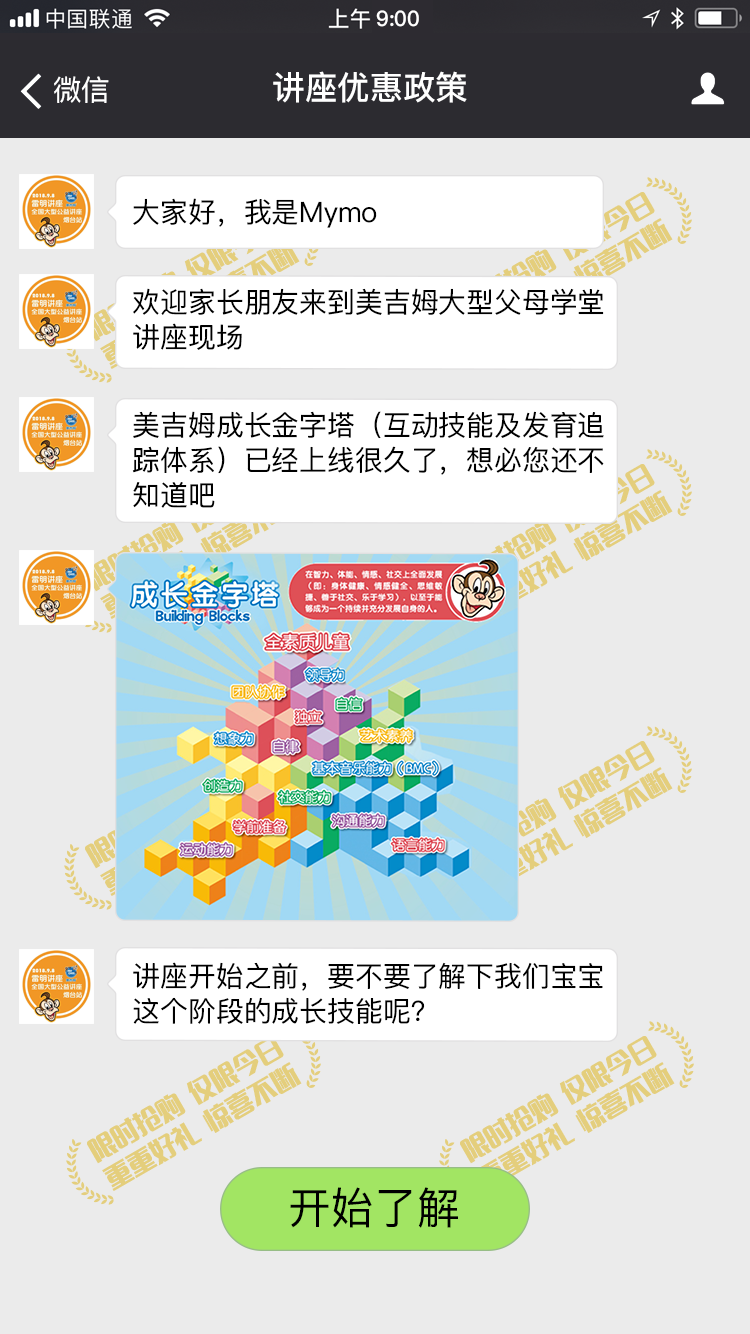
<style>
.page{position:relative;width:750px;height:1334px;background:#ebebeb}
.page>*{position:absolute;margin:0}
.t1{font:21.3px "PingFangSC-Medium";color:#ffffff}
.t2{font:28.8px "PingFangSC-Regular";color:#ffffff}
.t3{font:32.9px "PingFangSC-Medium";color:#ffffff}
.t4{font:28.1px "PingFangSC-Regular";color:#000000}
.t5{font:28.1px/40.8px "PingFangSC-Regular";color:#000000}
.t6{font:43.4px "PingFangSC-Regular";color:#000000}
</style>
<div class="page">
<p class="t1" style="left:376px;top:10px;width:43px;height:17px">9:00</p>
<p class="t2" style="left:54px;top:76px;width:55px;height:27px">微信</p>
<p class="t3" style="left:273px;top:71px;width:194px;height:32px">讲座优惠政策</p>
<p class="t4" style="left:133px;top:198px;width:244px;height:30px">大家好，我是Mymo</p>
<p class="t5" style="left:133px;top:288px;width:471px;height:62px">欢迎家长朋友来到美吉姆大型父母学堂<br>讲座现场</p>
<p class="t5" style="left:132px;top:411px;width:472px;height:97px">美吉姆成长金字塔（互动技能及发育追<br>踪体系）已经上线很久了，想必您还不<br>知道吧</p>
<p class="t5" style="left:133px;top:962px;width:470px;height:62px">讲座开始之前，要不要了解下我们宝宝<br>这个阶段的成长技能呢？</p>
<p class="t6" style="left:290px;top:1187px;width:168px;height:41px">开始了解</p>
</div>
